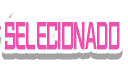
<style>
.page{position:relative;width:128px;height:68px;background:#ffffff}
.page>*{position:absolute;margin:0}
.t1{font:30.7px "KafuTechnoStd-HV";color:#eb51ad;font-weight:bold;scale:0.4 1}
</style>
<div class="page">
<p class="t1" style="left:5px;top:22px;width:115px;height:28px">SELECIONADO</p>
</div>
